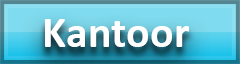
<style>
.page{position:relative;width:240px;height:64px}
.page>*{position:absolute;margin:0}
.t1{font:44.4px "Calibri-Bold";color:#ffffff}
</style>
<div class="page">
<p class="t1" style="left:45px;top:19px;width:144px;height:28px">Kantoor</p>
</div>
